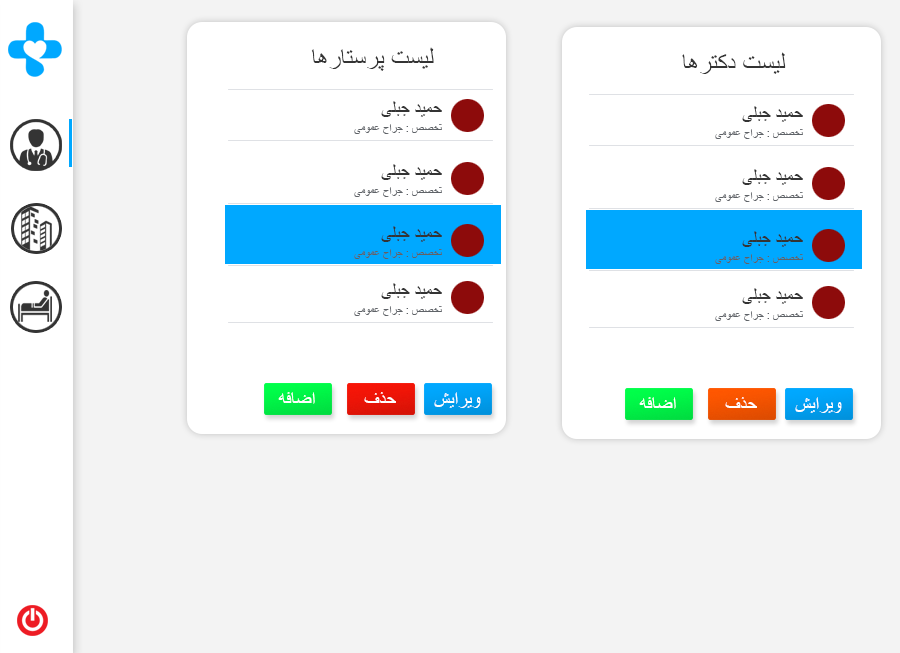
<style>
.page{position:relative;width:900px;height:653px;background:#f3f3f3}
.page>*{position:absolute;margin:0}
.t1{font:25.4px "ArialMT";color:#343434}
.t2{font:18px "ArialMT";color:#343434}
.t3{font:11px "ArialMT";color:#5f6368}
.t4{font:19px "ArialMT";color:#ffffff}
</style>
<div class="page">
<p class="t1" style="left:311px;top:47px;width:123px;height:24px">لیست پرستارها</p>
<p class="t1" style="left:682px;top:52px;width:104px;height:22px">لیست دکترها</p>
<p class="t2" style="left:381px;top:101px;width:61px;height:16px">حمید جبلی</p>
<p class="t2" style="left:742px;top:106px;width:61px;height:16px">حمید جبلی</p>
<p class="t3" style="left:354px;top:124px;width:88px;height:10px">تخصص : جراح عمومی</p>
<p class="t3" style="left:715px;top:129px;width:88px;height:10px">تخصص : جراح عمومی</p>
<p class="t2" style="left:381px;top:164px;width:61px;height:16px">حمید جبلی</p>
<p class="t2" style="left:742px;top:169px;width:61px;height:16px">حمید جبلی</p>
<p class="t3" style="left:354px;top:187px;width:88px;height:10px">تخصص : جراح عمومی</p>
<p class="t3" style="left:715px;top:192px;width:88px;height:10px">تخصص : جراح عمومی</p>
<p class="t2" style="left:381px;top:226px;width:61px;height:16px">حمید جبلی</p>
<p class="t2" style="left:742px;top:231px;width:61px;height:16px">حمید جبلی</p>
<p class="t3" style="left:354px;top:249px;width:88px;height:10px">تخصص : جراح عمومی</p>
<p class="t3" style="left:715px;top:254px;width:88px;height:10px">تخصص : جراح عمومی</p>
<p class="t2" style="left:381px;top:283px;width:61px;height:16px">حمید جبلی</p>
<p class="t2" style="left:742px;top:288px;width:61px;height:16px">حمید جبلی</p>
<p class="t3" style="left:354px;top:306px;width:88px;height:10px">تخصص : جراح عمومی</p>
<p class="t3" style="left:715px;top:311px;width:88px;height:10px">تخصص : جراح عمومی</p>
<p class="t4" style="left:278px;top:392px;width:37px;height:12px">اضافه</p>
<p class="t4" style="left:364px;top:392px;width:32px;height:11px">حذف</p>
<p class="t4" style="left:434px;top:392px;width:47px;height:16px">ویرایش</p>
<p class="t4" style="left:639px;top:397px;width:37px;height:12px">اضافه</p>
<p class="t4" style="left:725px;top:397px;width:32px;height:11px">حذف</p>
<p class="t4" style="left:795px;top:397px;width:47px;height:16px">ویرایش</p>
</div>
